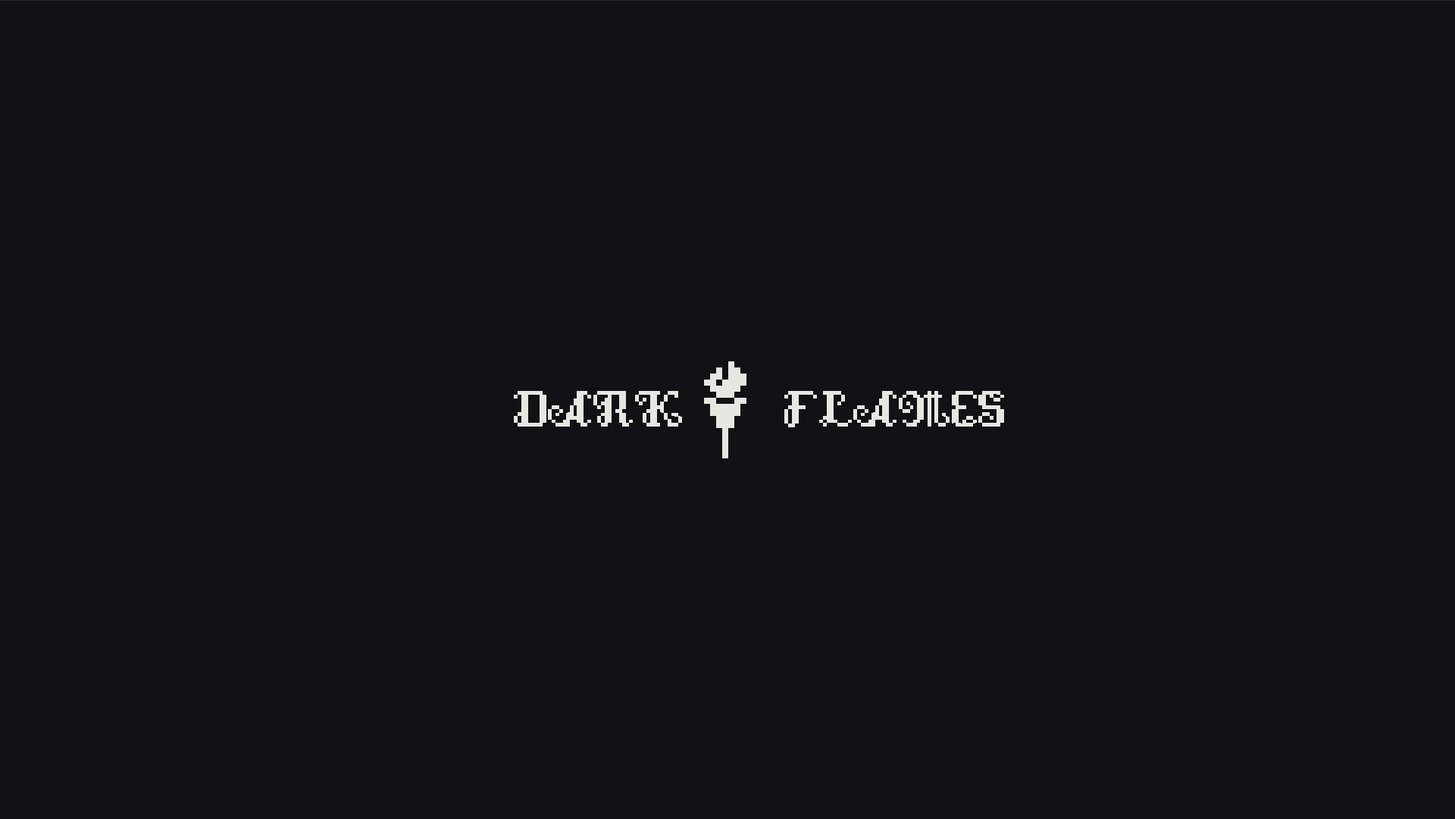
<style>
.page{position:relative;width:1455px;height:819px;background:#121216}
.page>*{position:absolute;margin:0}
.t1{font:60.6px "DungeonFont";color:#e8e6e1}
</style>
<div class="page">
<p class="t1" style="left:514px;top:391px;width:490px;height:36px">DARK       FLAMES</p>
</div>
